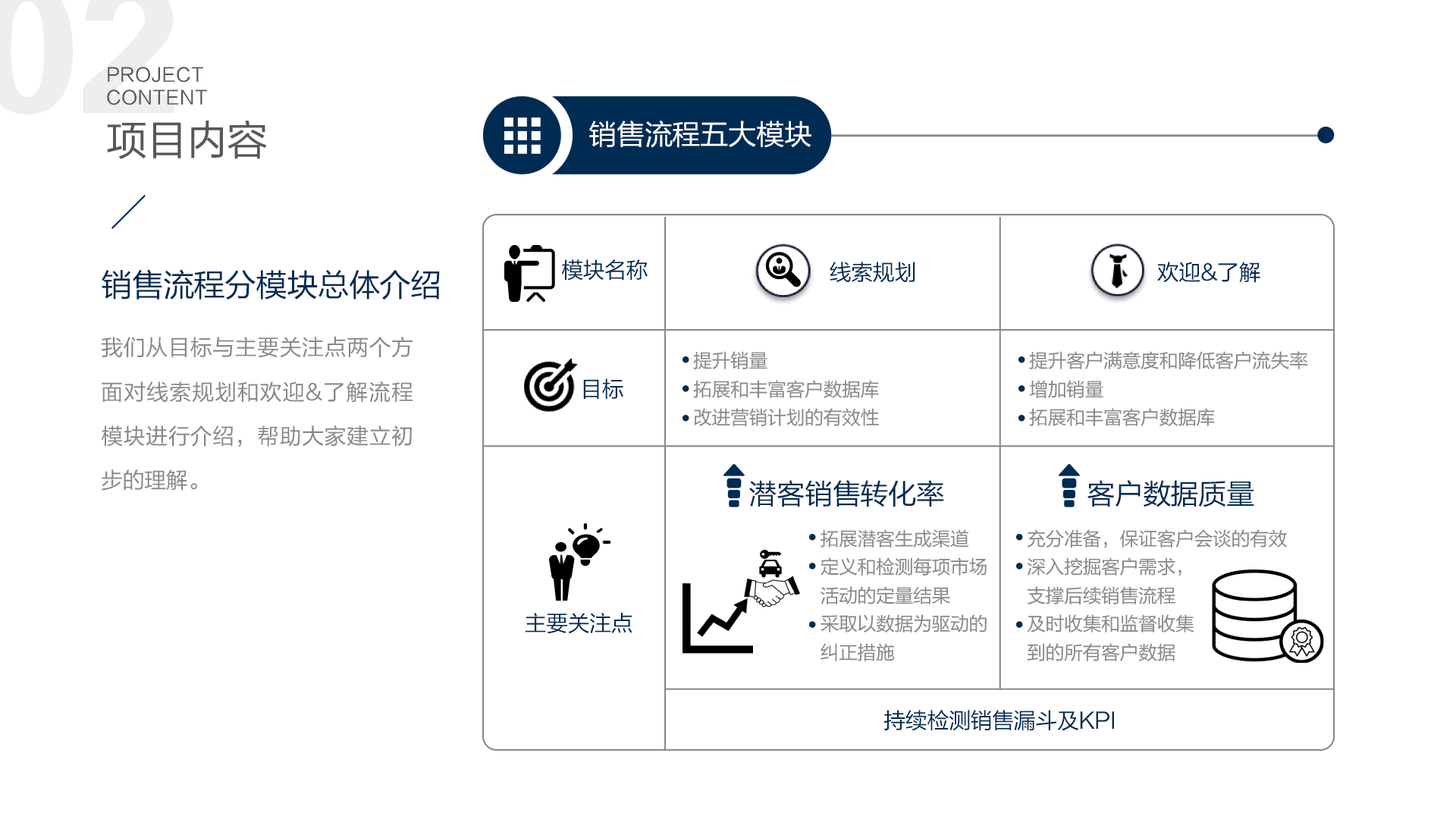
<style>
.page{position:relative;width:1456px;height:819px;background:#ffffff}
.page>*{position:absolute;margin:0}
.t1{font:18.8px "FZLTHJW--GB1-0";letter-spacing:0.02em;color:#595757}
.t2{font:41.1px "FZLTHJW--GB1-0";letter-spacing:-0.02em;color:#595757}
.t3{font:28.5px "FZLTHJW--GB1-0";letter-spacing:-0.02em;color:#ffffff}
.t4{font:31.6px "FZLTHJW--GB1-0";letter-spacing:-0.02em;color:#002c54}
.t5{font:22.1px "FZLTHJW--GB1-0";letter-spacing:-0.02em;color:#002c54}
.t6{font:22.1px/44.2px "FZLTHJW--GB1-0";letter-spacing:-0.02em;color:#888888}
.t7{font:19px/28.4px "FZLTHJW--GB1-0";letter-spacing:-0.02em;color:#888888}
.t8{font:28.4px "FZLTHJW--GB1-0";letter-spacing:-0.02em;color:#002c54}
</style>
<div class="page">
<p class="t1" style="left:107px;top:67px;width:101px;height:38px">PROJECT <br>CONTENT</p>
<p class="t2" style="left:107px;top:120px;width:160px;height:39px">项目内容</p>
<p class="t3" style="left:589px;top:121px;width:222px;height:27px">销售流程五大模块</p>
<p class="t4" style="left:102px;top:269px;width:338px;height:31px">销售流程分模块总体介绍</p>
<p class="t5" style="left:562px;top:259px;width:86px;height:22px">模块名称</p>
<p class="t5" style="left:830px;top:262px;width:85px;height:21px">线索规划</p>
<p class="t5" style="left:1157px;top:262px;width:103px;height:21px">欢迎&amp;了解</p>
<p class="t6" style="left:101px;top:337px;width:312px;height:154px;text-align:justify">我们从目标与主要关注点两个方面对线索规划和欢迎&amp;了解流程模块进行介绍，帮助大家建立初步的理解。</p>
<p class="t7" style="left:693px;top:351px;width:186px;height:76px">提升销量<br>拓展和丰富客户数据库<br>改进营销计划的有效性</p>
<p class="t7" style="left:1029px;top:351px;width:279px;height:75px">提升客户满意度和降低客户流失率 <br>增加销量<br>拓展和丰富客户数据库</p>
<p class="t5" style="left:583px;top:378px;width:40px;height:21px">目标</p>
<p class="t8" style="left:749px;top:480px;width:195px;height:27px">潜客销售转化率</p>
<p class="t8" style="left:1087px;top:480px;width:167px;height:27px">客户数据质量</p>
<p class="t7" style="left:821px;top:529px;width:166px;height:132px">拓展潜客生成渠道<br>定义和检测每项市场<br>活动的定量结果<br>采取以数据为驱动的<br>纠正措施</p>
<p class="t7" style="left:1027px;top:529px;width:260px;height:132px">充分准备，保证客户会谈的有效<br>深入挖掘客户需求，<br>支撑后续销售流程<br>及时收集和监督收集<br>到的所有客户数据</p>
<p class="t5" style="left:525px;top:613px;width:107px;height:21px">主要关注点</p>
<p class="t5" style="left:884px;top:710px;width:230px;height:21px">持续检测销售漏斗及KPI</p>
</div>
